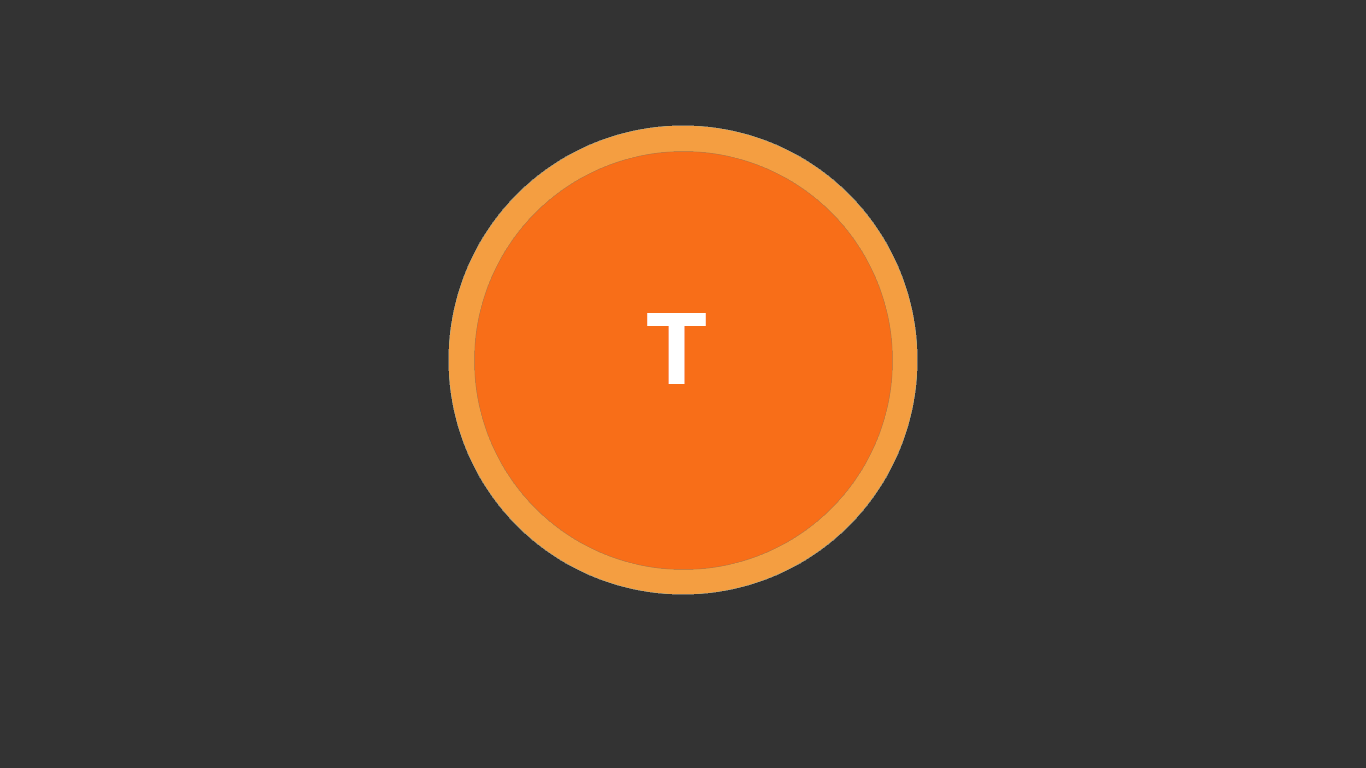
<style>
.page{position:relative;width:1366px;height:768px;background:#333333}
.page>*{position:absolute;margin:0}
.t1{font:100px "HelveticaNeue-Bold";color:#ffffff}
</style>
<div class="page">
<p class="t1" style="left:647px;top:313px;width:59px;height:71px">T</p>
</div>
